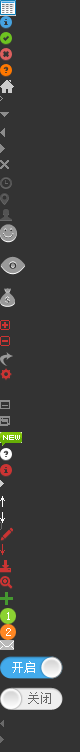
<style>
.page{position:relative;width:80px;height:752px;background:#333333}
.page>*{position:absolute;margin:0}
.t1{font:12px "SimSun";color:#ffffff}
.t2{font:12px "SimSun";letter-spacing:0.01em;color:#666666}
</style>
<div class="page">
<p class="t1" style="left:7px;top:612px;width:3px;height:8px">1</p>
<p class="t1" style="left:6px;top:628px;width:5px;height:8px">2</p>
<p class="t1" style="left:12px;top:661px;width:23px;height:12px">开启</p>
<p class="t2" style="left:28px;top:692px;width:23px;height:12px">关闭</p>
</div>
